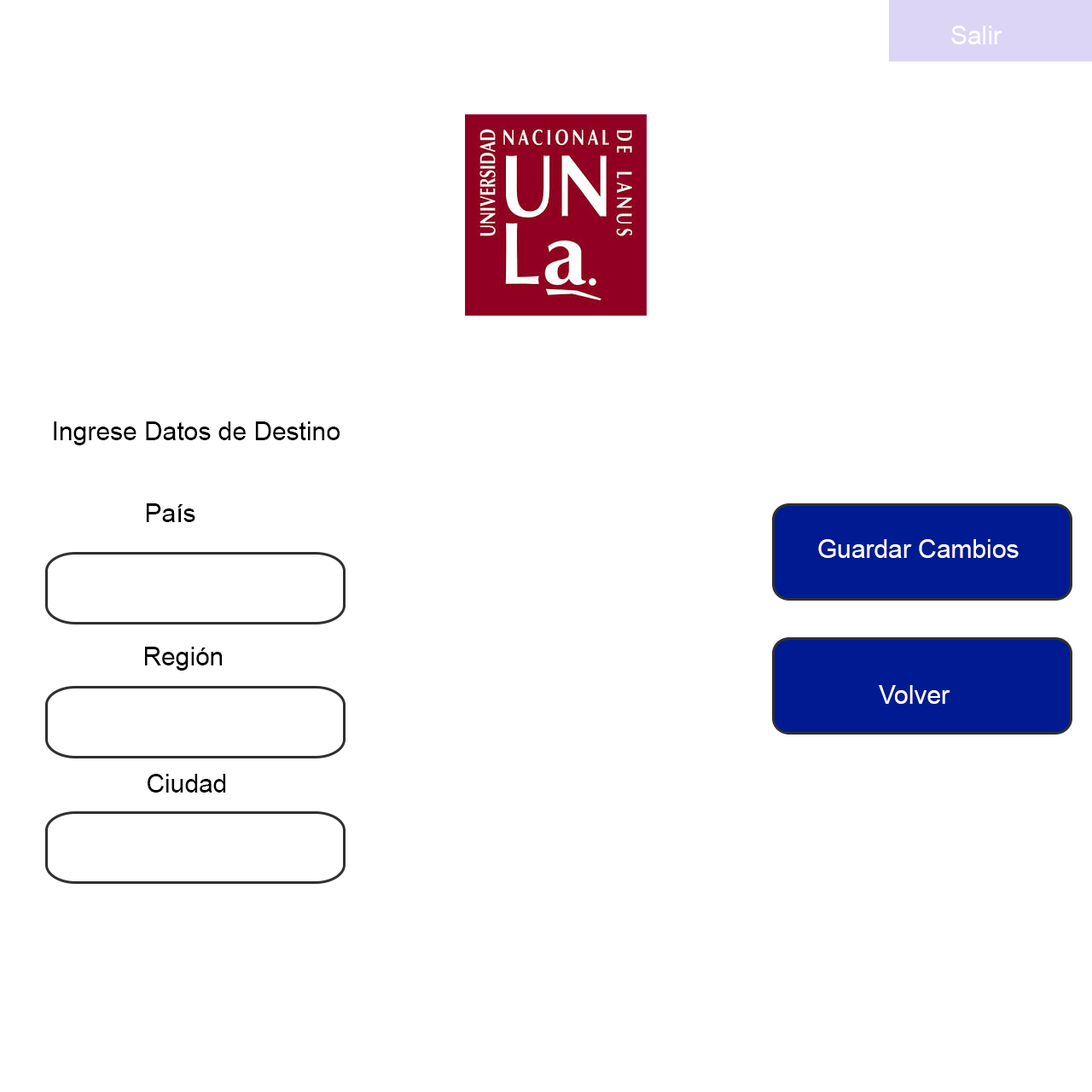
<style>
.page{position:relative;width:1092px;height:1092px;background:#ffffff}
.page>*{position:absolute;margin:0}
.t1{font:25.6px "ArialMT";color:#ffffff}
.t2{font:25.6px "ArialMT";color:#000000}
</style>
<div class="page">
<p class="t1" style="left:951px;top:26px;width:51px;height:18px">Salir</p>
<p class="t2" style="left:54px;top:421px;width:286px;height:24px">Ingrese Datos de Destino</p>
<p class="t2" style="left:146px;top:503px;width:49px;height:19px">País</p>
<p class="t1" style="left:818px;top:539px;width:201px;height:19px">Guardar Cambios</p>
<p class="t2" style="left:145px;top:647px;width:78px;height:24px">Región</p>
<p class="t1" style="left:879px;top:685px;width:71px;height:19px">Volver</p>
<p class="t2" style="left:148px;top:774px;width:78px;height:19px">Ciudad</p>
</div>
